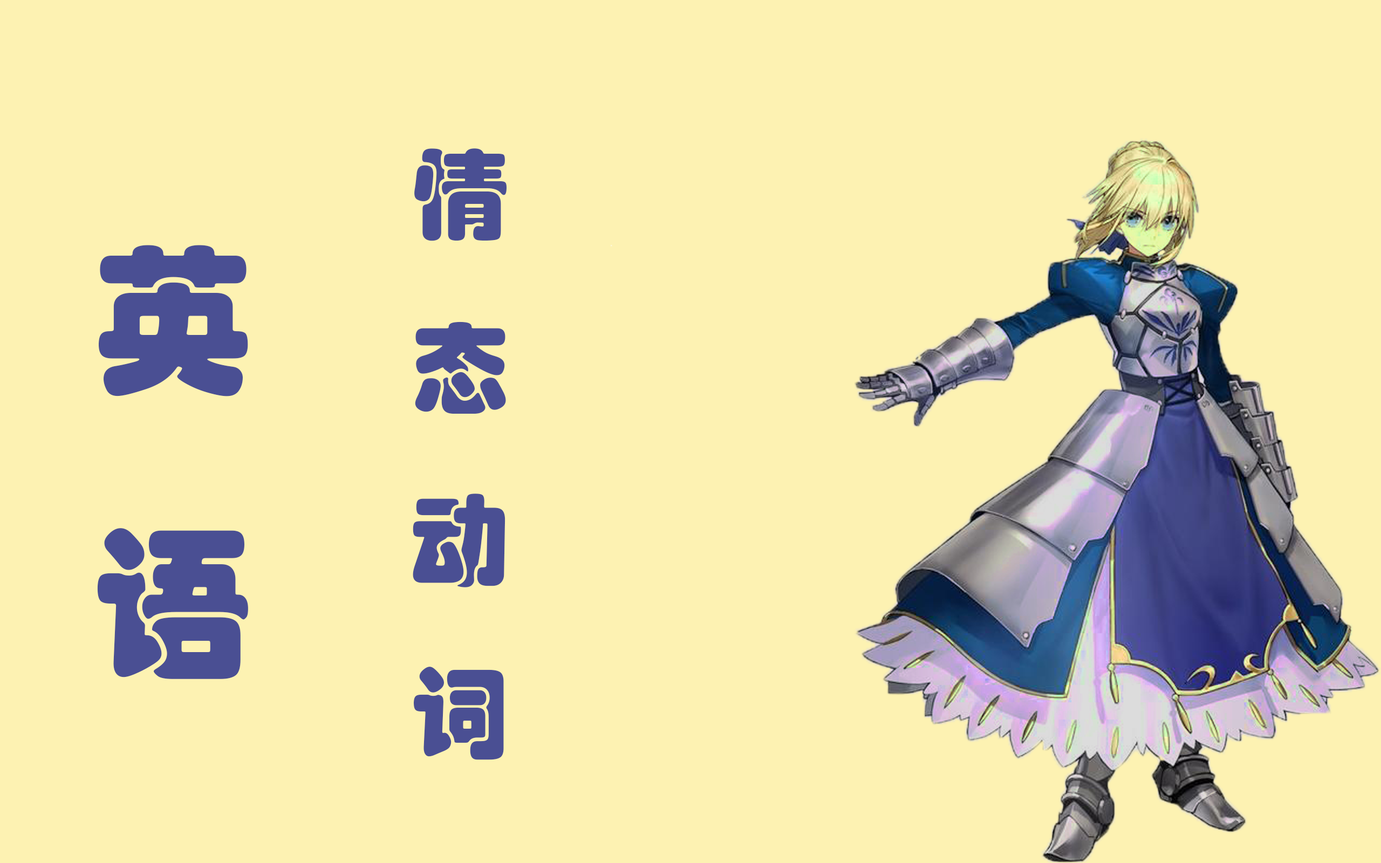
<style>
.page{position:relative;width:1381px;height:863px;background:#fdf2b2}
.page>*{position:absolute;margin:0}
.t1{font:98.9px "STHupo";color:#4a4f93}
</style>
<div class="page">
<p class="t1" style="left:413px;top:148px;width:94px;height:612px">情<br>态<br>动<br>词</p>
</div>
